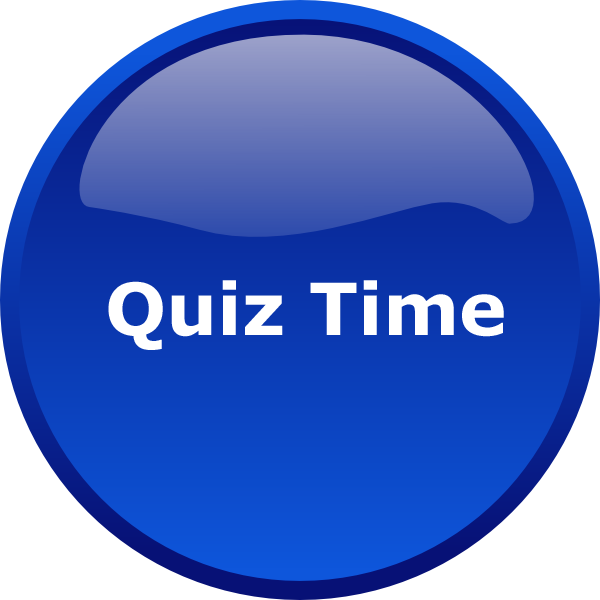
<style>
.page{position:relative;width:600px;height:600px;background:#ffffff}
.page>*{position:absolute;margin:0}
.t1{font:72px "Verdana-Bold";color:#ffffff}
.t2{font:24px "Courier-Bold";color:#000000}
</style>
<div class="page">
<p class="t1" style="left:108px;top:280px;width:396px;height:70px"><span class="t2"><br> </span>Quiz Time</p>
</div>
